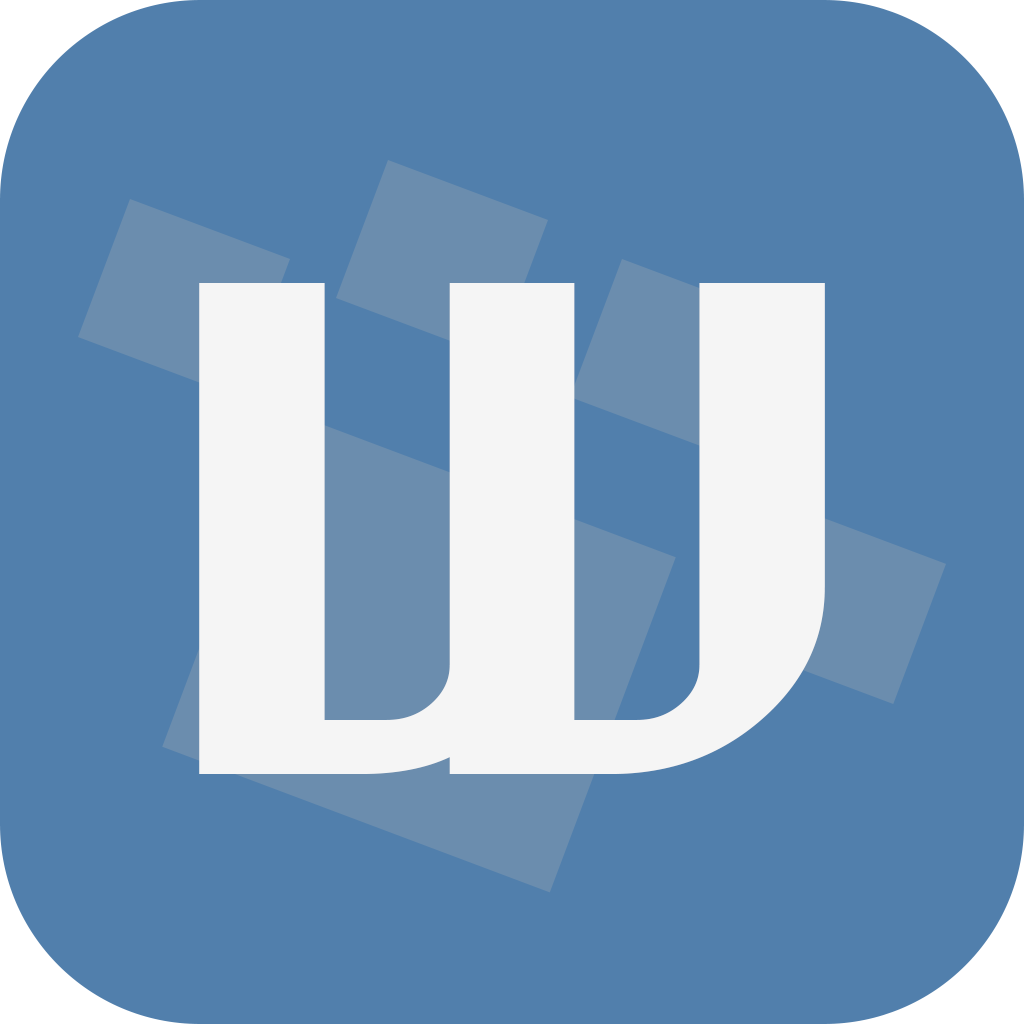
<style>
.page{position:relative;width:1024px;height:1024px;background:#517fac}
.page>*{position:absolute;margin:0}
.t1{font:655.2px "Silom";color:#f5f5f5;scale:1.14 1}
</style>
<div class="page">
<p class="t1" style="left:199px;top:283px;width:626px;height:491px">W</p>
</div>
